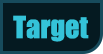
<style>
.page{position:relative;width:103px;height:54px;background:#051a21}
.page>*{position:absolute;margin:0}
.t1{font:28.2px "Impact";color:#34c3d9}
</style>
<div class="page">
<p class="t1" style="left:13px;top:15px;width:76px;height:27px">Target</p>
</div>
